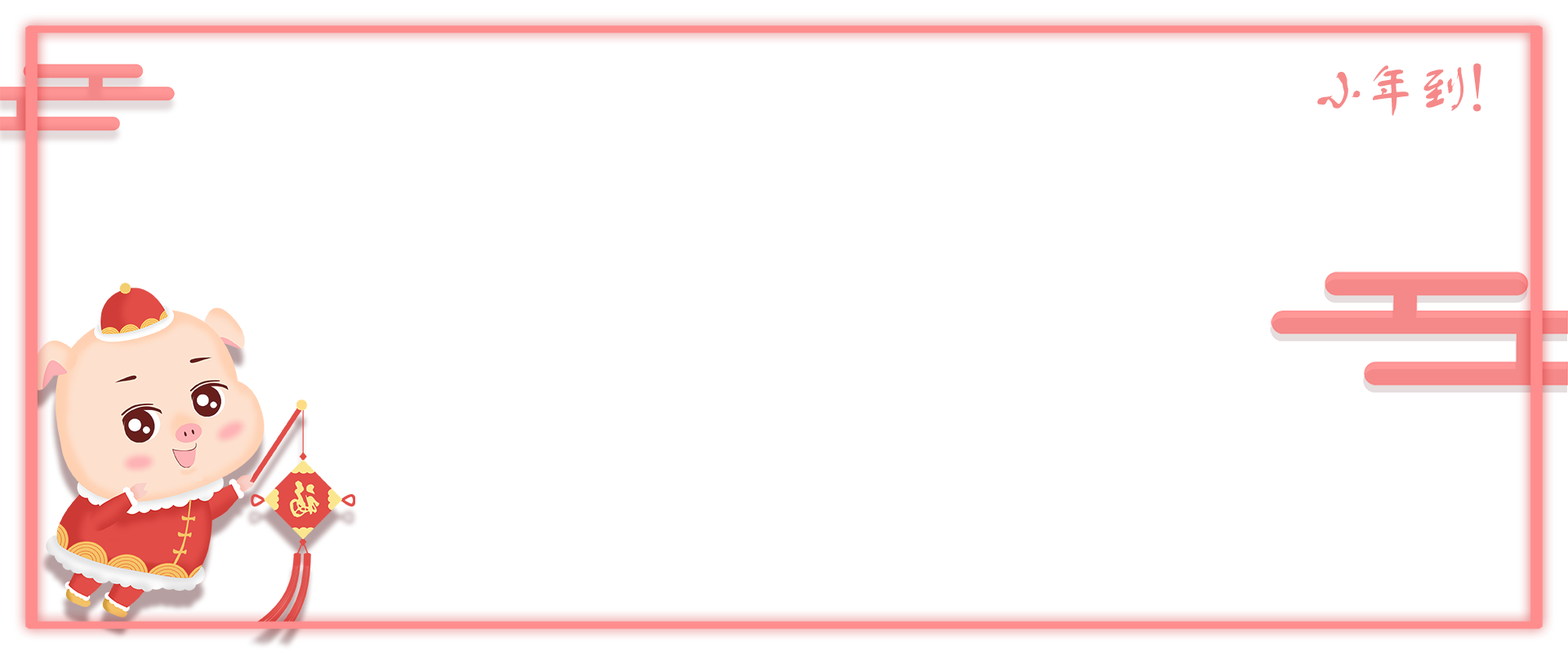
<style>
.page{position:relative;width:1568px;height:656px;background:#ffffff}
.page>*{position:absolute;margin:0}
.t1{font:58.8px "FZSTK--GBK1-0";letter-spacing:-0.14em;color:#f58989}
</style>
<div class="page">
<p class="t1" style="left:1317px;top:63px;width:164px;height:53px">小年到！</p>
</div>
